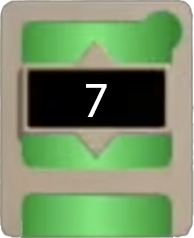
<style>
.page{position:relative;width:194px;height:238px}
.page>*{position:absolute;margin:0}
.t1{font:50px "MyriadPro-Regular";color:#ffffff}
</style>
<div class="page">
<p class="t1" style="left:86px;top:84px;width:21px;height:33px">7</p>
</div>
